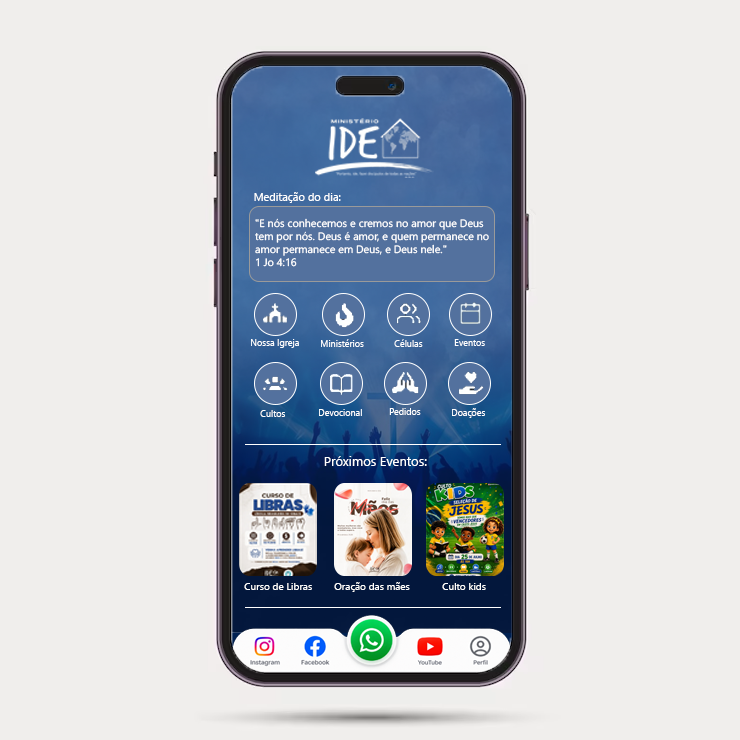
<style>
.page{position:relative;width:740px;height:740px;background:#f0eeec}
.page>*{position:absolute;margin:0}
.t1{font:11px "SegoeUIHistoric";color:#ffffff}
.t2{font:10.7px "SegoeUIHistoric";color:#ffffff}
.t3{font:9px "SegoeUIHistoric";color:#ffffff}
.t4{font:13px "SegoeUIHistoric";color:#ffffff}
.t5{font:10px "SegoeUIHistoric";color:#ffffff}
</style>
<div class="page">
<p class="t1" style="left:254px;top:192px;width:87px;height:11px">Meditação do dia:</p>
<p class="t2" style="left:255px;top:218px;width:234px;height:49px">"E nós conhecemos e cremos no amor que Deus<br>tem por nós. Deus é amor, e quem permanece no <br>amor permanece em Deus, e Deus nele." <br>1 Jo 4:16</p>
<p class="t3" style="left:251px;top:339px;width:48px;height:9px">Nossa Igreja</p>
<p class="t3" style="left:321px;top:339px;width:43px;height:8px">Ministérios</p>
<p class="t3" style="left:394px;top:339px;width:29px;height:8px">Células</p>
<p class="t3" style="left:454px;top:339px;width:31px;height:7px">Eventos</p>
<p class="t3" style="left:260px;top:410px;width:25px;height:7px">Cultos</p>
<p class="t3" style="left:319px;top:409px;width:43px;height:7px">Devocional</p>
<p class="t3" style="left:389px;top:408px;width:32px;height:7px">Pedidos</p>
<p class="t3" style="left:452px;top:408px;width:33px;height:10px">Doações</p>
<p class="t4" style="left:324px;top:456px;width:103px;height:10px">Próximos Eventos:</p>
<p class="t5" style="left:334px;top:582px;width:76px;height:10px">Oração das mães</p>
<p class="t5" style="left:244px;top:583px;width:68px;height:7px">Curso de Libras</p>
<p class="t5" style="left:442px;top:583px;width:44px;height:7px">Culto kids</p>
</div>
